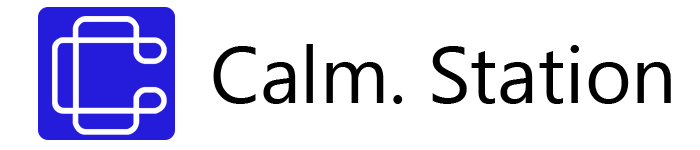
<style>
.page{position:relative;width:700px;height:150px;background:#ffffff}
.page>*{position:absolute;margin:0}
.t1{font:80px "MicrosoftTaiLe";color:#000000}
</style>
<div class="page">
<p class="t1" style="left:213px;top:44px;width:458px;height:60px">Calm. Station</p>
</div>
